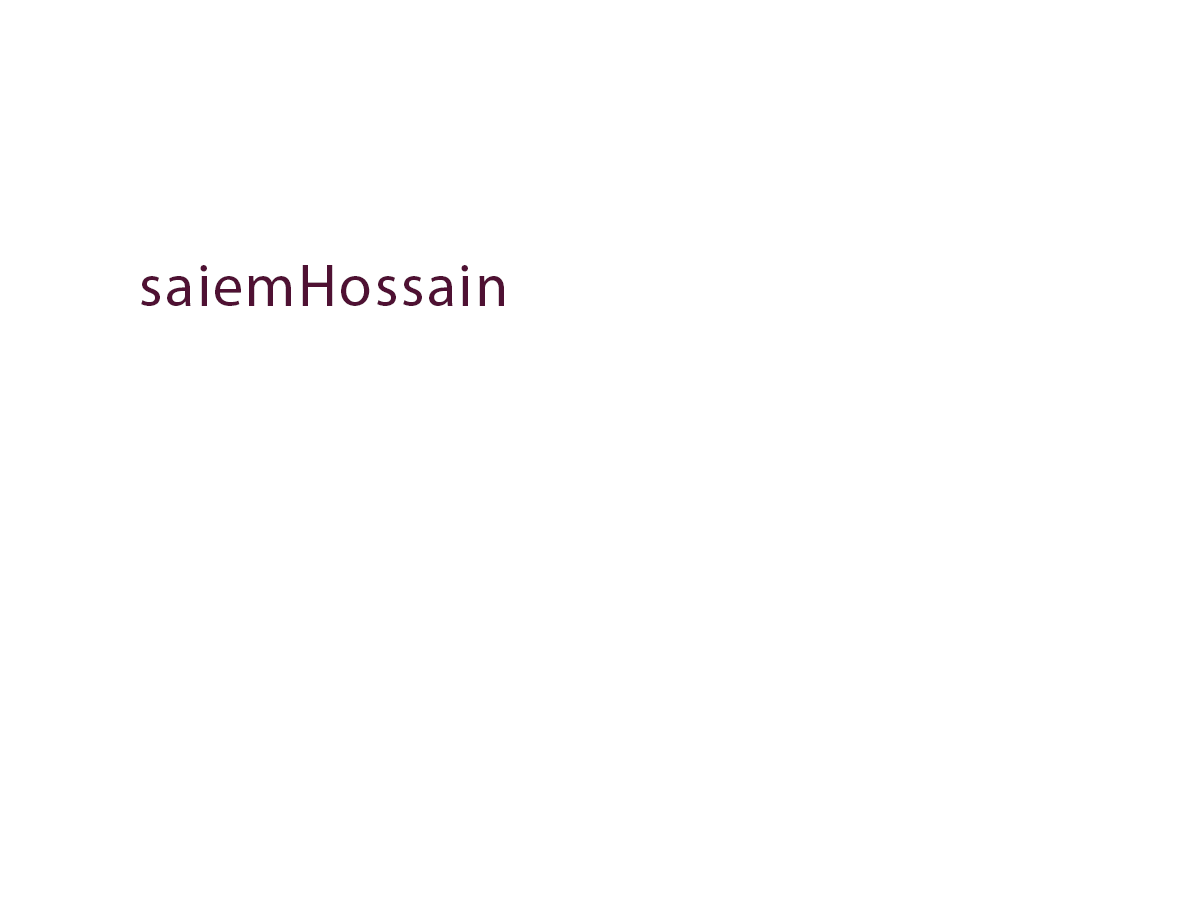
<style>
.page{position:relative;width:1200px;height:900px;background:#ffffff}
.page>*{position:absolute;margin:0}
.t1{font:60px "MyriadPro-Regular";letter-spacing:0.04em;color:#4f1133}
</style>
<div class="page">
<p class="t1" style="left:141px;top:265px;width:363px;height:41px">saiemHossain</p>
</div>
